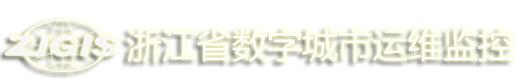
<style>
.page{position:relative;width:525px;height:84px;background:#ffffff}
.page>*{position:absolute;margin:0}
.t1{font:35.1px "MicrosoftYaHeiUI";color:#fffefd}
</style>
<div class="page">
<p class="t1" style="left:126px;top:27px;width:387px;height:36px">浙江省数字城市运维监控</p>
</div>
